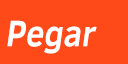
<style>
.page{position:relative;width:128px;height:64px;background:#fe4a18}
.page>*{position:absolute;margin:0}
.t1{font:37.8px "FogSansIt";color:#ffffff;scale:0.87 1}
</style>
<div class="page">
<p class="t1" style="left:7px;top:20px;width:90px;height:34px">Pegar</p>
</div>
